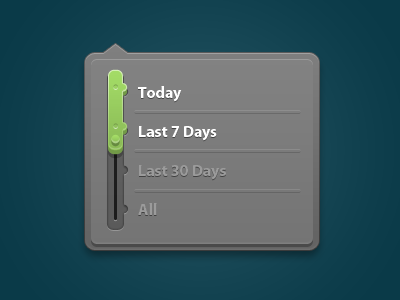
<style>
.page{position:relative;width:400px;height:300px}
.page>*{position:absolute;margin:0}
.t1{font:16px/39px "MyriadPro-Bold";color:#ffffff}
.t2{font:16px/39px "MyriadPro-Bold";color:#9b9b9b}
</style>
<div class="page">
<p class="t1" style="left:138px;top:86px;width:88px;height:129px">Today<br>Last 7 Days<br><span class="t2">Last 30 Days<br>All</span></p>
</div>
